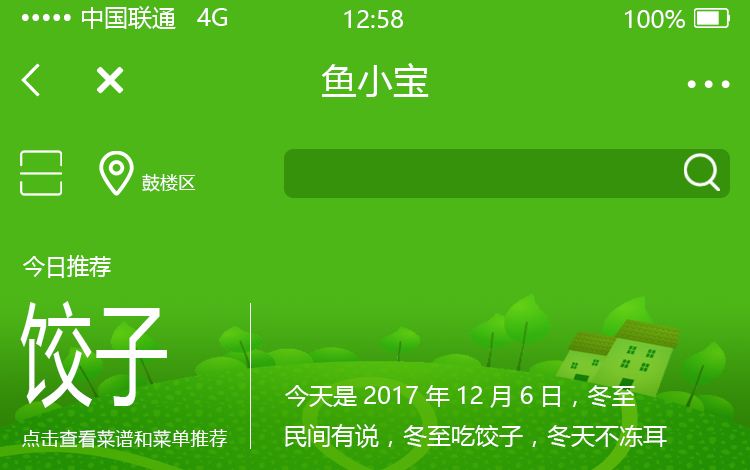
<style>
.page{position:relative;width:750px;height:470px;background:#4db718}
.page>*{position:absolute;margin:0}
.t1{font:24px "MicrosoftYaHei";color:#fffefe}
.t2{font:36px "MicrosoftYaHei";color:#fffefe}
.t3{font:18px "MicrosoftYaHei";color:#fffefe}
.t4{font:22px "MicrosoftYaHei";color:#fffefe}
.t5{font:110px "MicrosoftYaHei";letter-spacing:0.04em;color:#fffefe;scale:0.66 1}
.t6{font:18px "MicrosoftYaHei";letter-spacing:0.04em;color:#fffefe}
</style>
<div class="page">
<p class="t1" style="left:22px;top:6px;width:205px;height:23px">••••• 中国联通   4G</p>
<p class="t1" style="left:344px;top:10px;width:59px;height:18px">12:58</p>
<p class="t1" style="left:625px;top:10px;width:60px;height:18px">100%</p>
<p class="t2" style="left:321px;top:63px;width:108px;height:34px">鱼小宝</p>
<p class="t3" style="left:142px;top:173px;width:54px;height:19px">鼓楼区</p>
<p class="t4" style="left:23px;top:255px;width:88px;height:23px">今日推荐</p>
<p class="t5" style="left:20px;top:301px;width:147px;height:107px">饺子</p>
<p class="t1" style="left:285px;top:385px;width:350px;height:23px">今天是2017年12月6日，冬至</p>
<p class="t1" style="left:285px;top:424px;width:382px;height:24px">民间有说，冬至吃饺子，冬天不冻耳</p>
<p class="t6" style="left:22px;top:429px;width:205px;height:19px">点击查看菜谱和菜单推荐</p>
</div>
